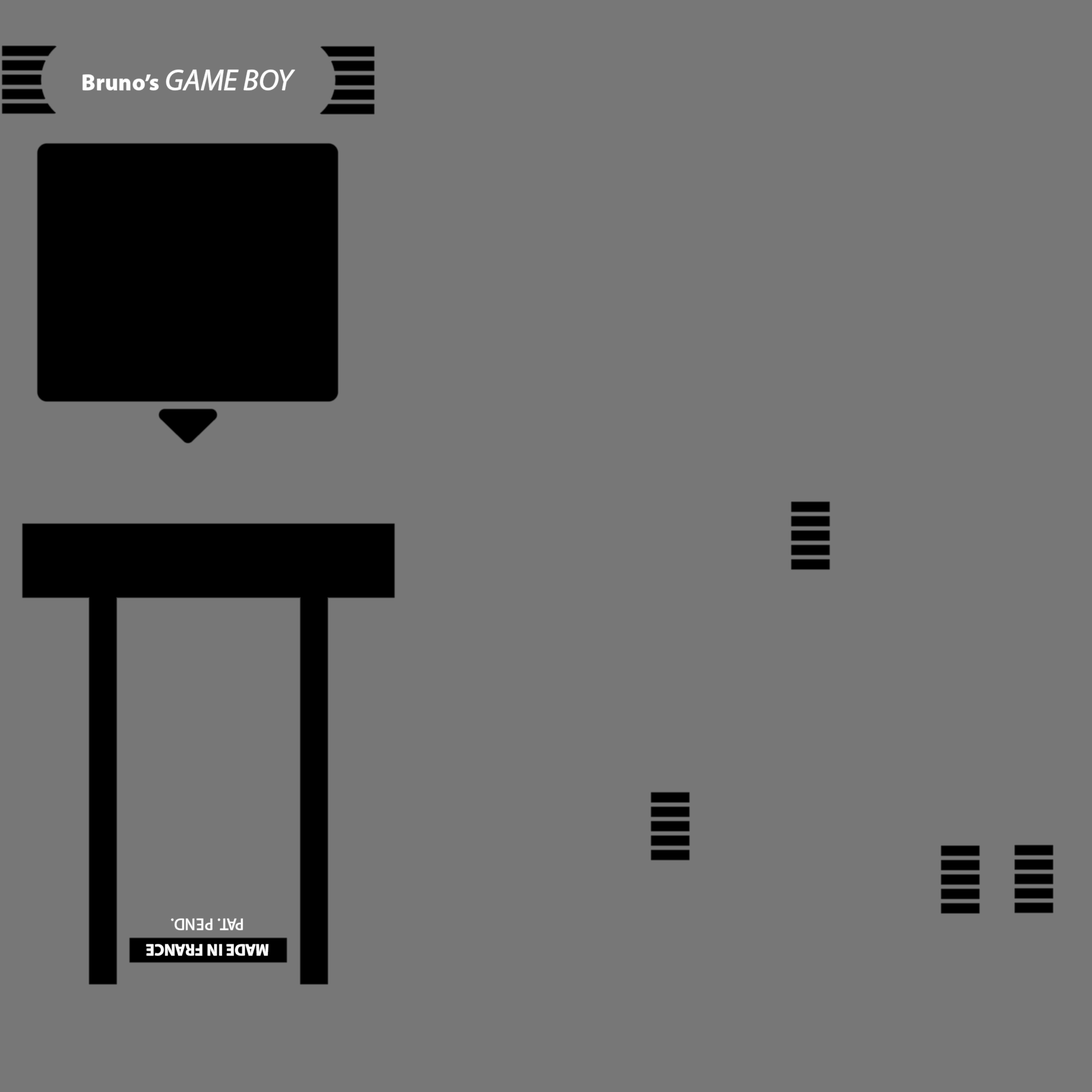
<style>
.page{position:relative;width:1092px;height:1092px;background:#777777}
.page>*{position:absolute;margin:0}
.t1{font:22.4px "MyriadPro-Bold";letter-spacing:0.025em;color:#ffffff}
.t2{font:29.9px "MyriadPro-It";color:#ffffff}
.t3{font:16px "MyriadPro-Regular";letter-spacing:0.025em;color:#ffffff}
.t4{font:16px "MyriadPro-Bold";color:#ffffff}
</style>
<div class="page">
<p class="t1" style="left:83px;top:75px;width:75px;height:15px">Bruno’s</p>
<p class="t2" style="left:166px;top:70px;width:129px;height:20px">GAME BOY</p>
<p class="t3" style="left:171px;top:919px;width:72px;height:11px;rotate:180deg">PAT. PEND.</p>
<p class="t3" style="left:171px;top:919px;width:72px;height:11px;rotate:180deg">PAT. PEND.</p>
<p class="t4" style="left:146px;top:944px;width:122px;height:11px;rotate:180deg">MADE IN FRANCE</p>
</div>
